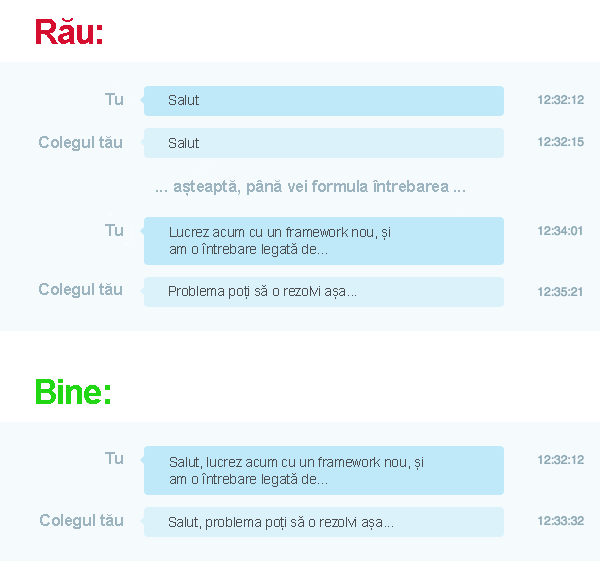
<style>
.page{position:relative;width:600px;height:580px;background:#f5fafc}
.page>*{position:absolute;margin:0}
.t1{font:34.9px "Arial-BoldMT";letter-spacing:-0.025em;color:#d50d2e}
.t2{font:16.9px "Arial-BoldMT";letter-spacing:-0.025em;color:#9bb4bf}
.t3{font:13.9px "ArialMT";letter-spacing:-0.025em;color:#4c4d4e}
.t4{font:13.9px/16.5px "ArialMT";letter-spacing:-0.025em;color:#4c4d4e}
.t5{font:34.9px "Arial-BoldMT";letter-spacing:-0.025em;color:#21d714}
</style>
<div class="page">
<p class="t1" style="left:36px;top:18px;width:66px;height:26px">Rău:</p>
<p class="t2" style="left:105px;top:93px;width:18px;height:12px">Tu</p>
<p class="t3" style="left:169px;top:95px;width:30px;height:10px">Salut</p>
<p class="t2" style="left:39px;top:136px;width:83px;height:15px">Colegul tău</p>
<p class="t3" style="left:169px;top:138px;width:30px;height:10px">Salut</p>
<p class="t2" style="left:156px;top:180px;width:309px;height:16px">... așteaptă, până vei formula întrebarea ...</p>
<p class="t2" style="left:105px;top:224px;width:18px;height:12px">Tu</p>
<p class="t4" style="left:170px;top:227px;width:220px;height:30px">Lucrez acum cu un framework nou, și<br>am o întrebare legată de...</p>
<p class="t2" style="left:39px;top:283px;width:83px;height:15px">Colegul tău</p>
<p class="t3" style="left:169px;top:285px;width:187px;height:14px">Problema poți să o rezolvi așa...</p>
<p class="t5" style="left:36px;top:379px;width:74px;height:25px">Bine:</p>
<p class="t2" style="left:105px;top:452px;width:18px;height:12px">Tu</p>
<p class="t4" style="left:170px;top:457px;width:253px;height:30px">Salut, lucrez acum cu un framework nou, și<br>am o întrebare legată de...</p>
<p class="t2" style="left:40px;top:514px;width:83px;height:15px">Colegul tău</p>
<p class="t3" style="left:169px;top:516px;width:224px;height:14px">Salut, problema poți să o rezolvi așa...</p>
</div>
